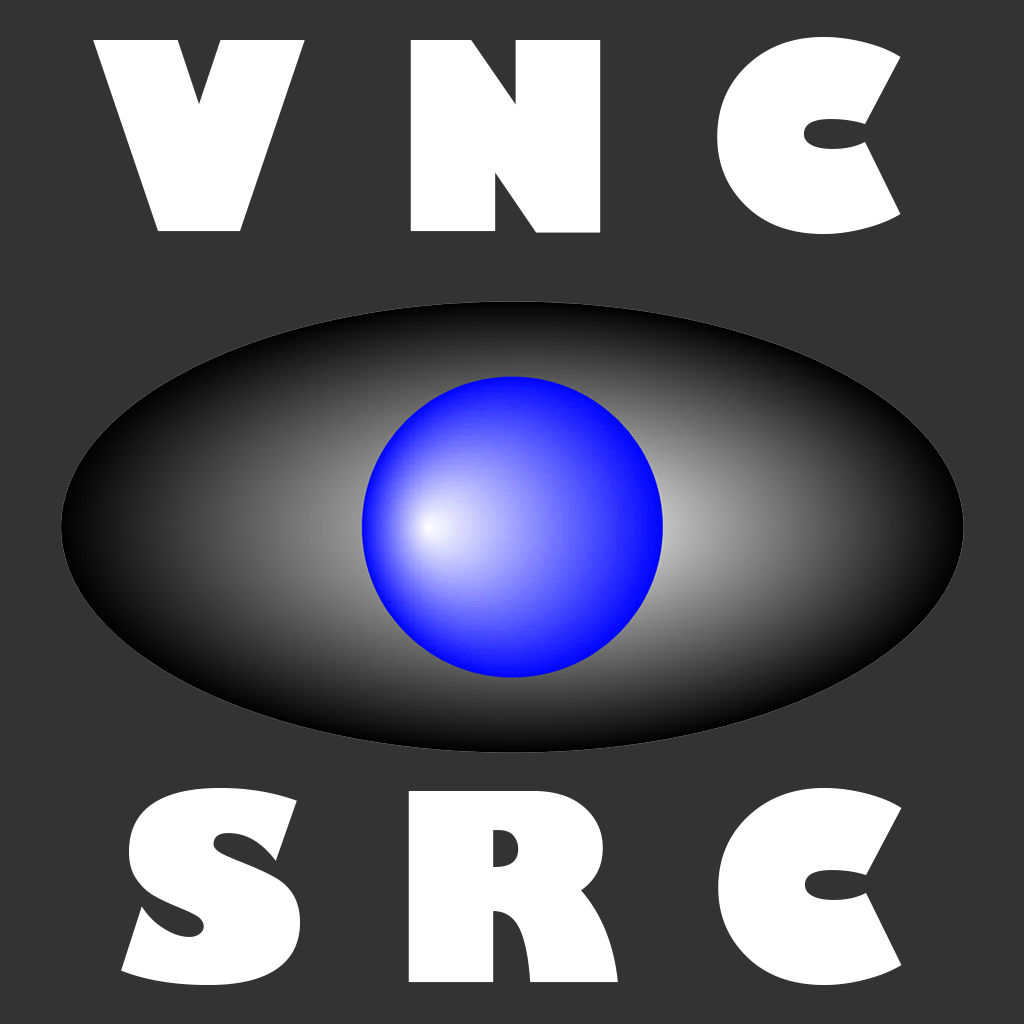
<style>
.page{position:relative;width:1024px;height:1024px;background:#333333}
.page>*{position:absolute;margin:0}
.t1{font:256px "GillSans-UltraBold";color:#ffffff}
</style>
<div class="page">
<p class="t1" style="left:93px;top:37px;width:808px;height:197px">V N C</p>
<p class="t1" style="left:121px;top:788px;width:781px;height:197px">S R C</p>
</div>
